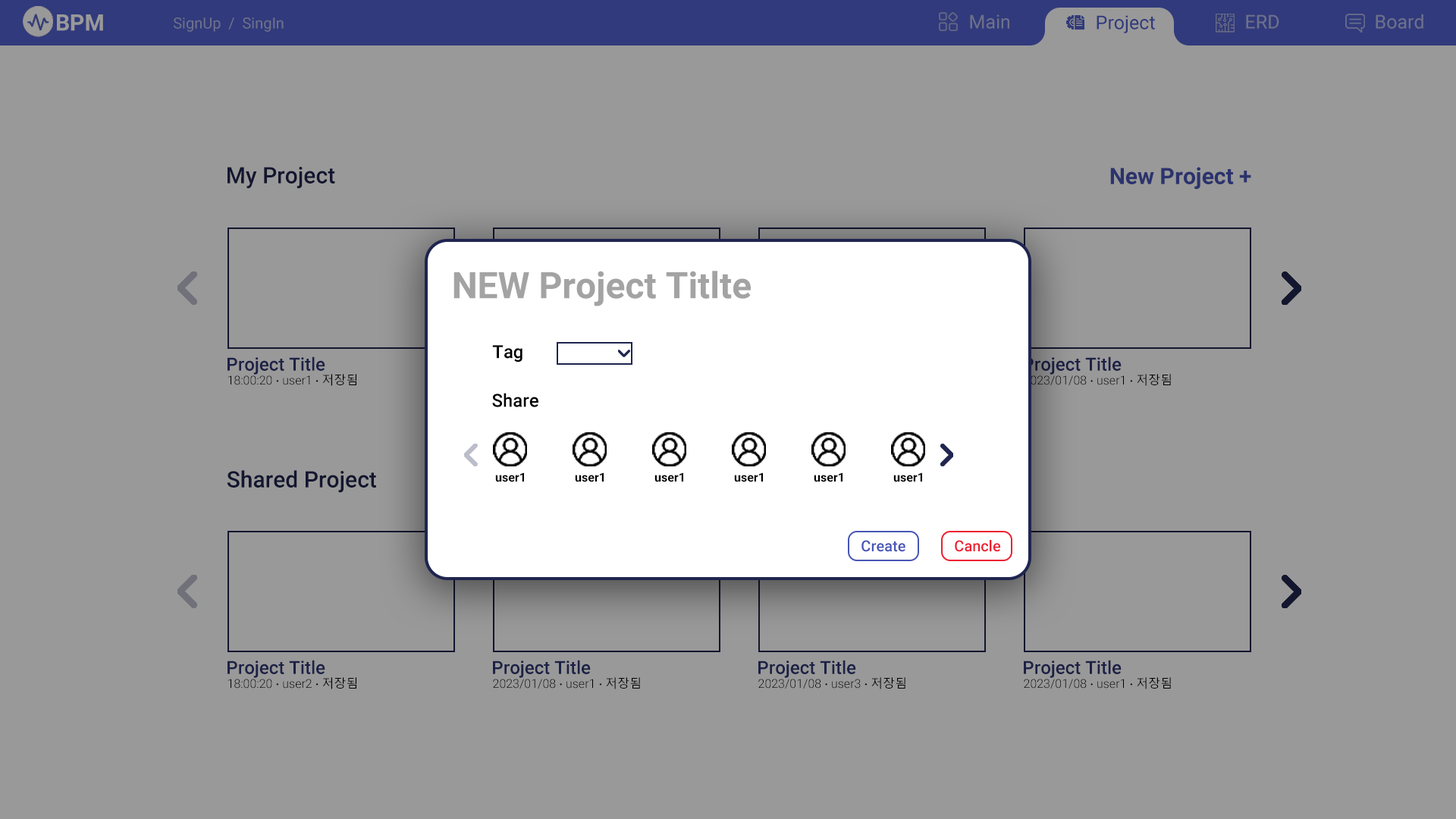
<style>
.page{position:relative;width:1456px;height:819px;background:#999999}
.page>*{position:absolute;margin:0}
.t1{font:22.7px "Roboto-Bold";color:#999999}
.t2{font:15.2px "Roboto-Regular";color:#6d708b}
.t3{font:19px "Roboto-Regular";color:#6d708b}
.t4{font:19px "Roboto-Regular";color:#313a7c}
.t5{font:22.7px "Roboto-Medium";color:#13162f}
.t6{font:22.7px "Roboto-Bold";color:#2b336d}
.t7{font:36.4px "Roboto-Bold";color:#a3a3a3}
.t8{font:18.2px "Roboto-Medium";color:#000000}
.t9{font:18.2px "Roboto-Medium";color:#1c2146}
.t10{font:12.1px "Roboto-Light";color:#000000}
.t11{font:12.1px "MalgunGothic";color:#000000}
.t12{font:12.1px "Roboto-Bold";color:#000000}
.t13{font:15.2px "Roboto-Medium";color:#4755b5}
.t14{font:15.2px "Roboto-Medium";color:#ed2130}
</style>
<div class="page">
<p class="t1" style="left:57px;top:14px;width:46px;height:17px">BPM</p>
<p class="t2" style="left:174px;top:17px;width:110px;height:15px">SignUp  /  SingIn</p>
<p class="t3" style="left:970px;top:14px;width:39px;height:15px">Main</p>
<p class="t4" style="left:1097px;top:15px;width:58px;height:18px">Project</p>
<p class="t3" style="left:1246px;top:14px;width:33px;height:15px">ERD</p>
<p class="t3" style="left:1376px;top:14px;width:47px;height:15px">Board</p>
<p class="t5" style="left:227px;top:167px;width:108px;height:22px">My Project</p>
<p class="t6" style="left:1110px;top:167px;width:141px;height:23px">New Project +</p>
<p class="t7" style="left:453px;top:271px;width:298px;height:35px">NEW Project Titlte</p>
<p class="t8" style="left:492px;top:345px;width:30px;height:17px">Tag</p>
<p class="t9" style="left:227px;top:356px;width:98px;height:19px">Project Title</p>
<p class="t9" style="left:1024px;top:356px;width:98px;height:19px">Project Title</p>
<p class="t10" style="left:228px;top:374px;width:128px;height:12px">18:00:20 <span class="t11">∙</span> user1 <span class="t11">∙ 저장됨</span></p>
<p class="t10" style="left:1024px;top:374px;width:147px;height:12px">2023/01/08 <span class="t11">∙</span> user1 <span class="t11">∙ 저장됨</span></p>
<p class="t8" style="left:492px;top:393px;width:46px;height:14px">Share</p>
<p class="t5" style="left:227px;top:470px;width:149px;height:23px">Shared Project</p>
<p class="t12" style="left:495px;top:472px;width:29px;height:10px">user1</p>
<p class="t12" style="left:575px;top:472px;width:29px;height:10px">user1</p>
<p class="t12" style="left:654px;top:472px;width:29px;height:10px">user1</p>
<p class="t12" style="left:734px;top:472px;width:29px;height:10px">user1</p>
<p class="t12" style="left:814px;top:472px;width:28px;height:10px">user1</p>
<p class="t12" style="left:893px;top:472px;width:29px;height:10px">user1</p>
<p class="t13" style="left:861px;top:540px;width:44px;height:12px">Create</p>
<p class="t14" style="left:955px;top:540px;width:45px;height:12px">Cancle</p>
<p class="t9" style="left:227px;top:660px;width:98px;height:18px">Project Title</p>
<p class="t9" style="left:493px;top:660px;width:98px;height:18px">Project Title</p>
<p class="t9" style="left:758px;top:660px;width:98px;height:18px">Project Title</p>
<p class="t9" style="left:1024px;top:660px;width:98px;height:18px">Project Title</p>
<p class="t10" style="left:228px;top:677px;width:128px;height:12px">18:00:20 <span class="t11">∙</span> user2 <span class="t11">∙ 저장됨</span></p>
<p class="t10" style="left:493px;top:677px;width:147px;height:12px">2023/01/08 <span class="t11">∙</span> user1 <span class="t11">∙ 저장됨</span></p>
<p class="t10" style="left:758px;top:677px;width:147px;height:12px">2023/01/08 <span class="t11">∙</span> user3 <span class="t11">∙ 저장됨</span></p>
<p class="t10" style="left:1024px;top:677px;width:147px;height:12px">2023/01/08 <span class="t11">∙</span> user1 <span class="t11">∙ 저장됨</span></p>
</div>
